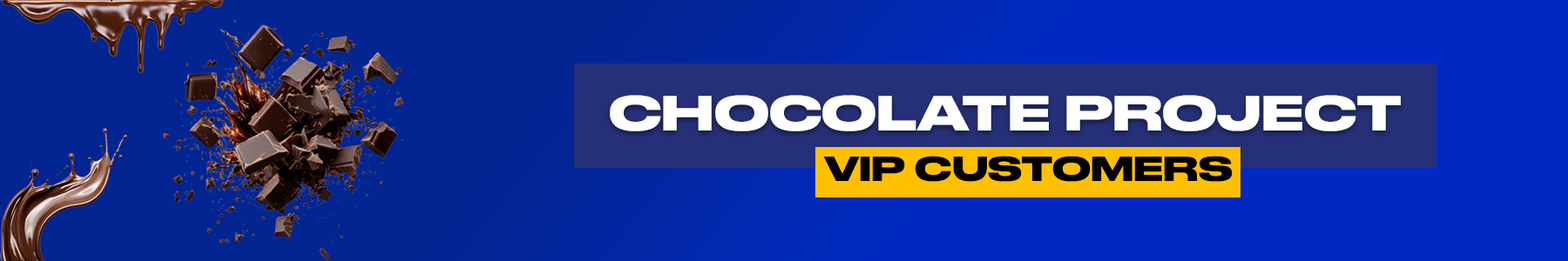
<style>
.page{position:relative;width:1568px;height:261px;background:#032592}
.page>*{position:absolute;margin:0}
.t1{font:46.6px "DrukWide-Bold";color:#ffffff}
.t2{font:32.7px "DrukWide-Bold";color:#000000}
</style>
<div class="page">
<p class="t1" style="left:610px;top:95px;width:791px;height:37px">CHOCOLATE PROJECT</p>
<p class="t2" style="left:823px;top:156px;width:410px;height:26px">VIP CUSTOMERS</p>
</div>
